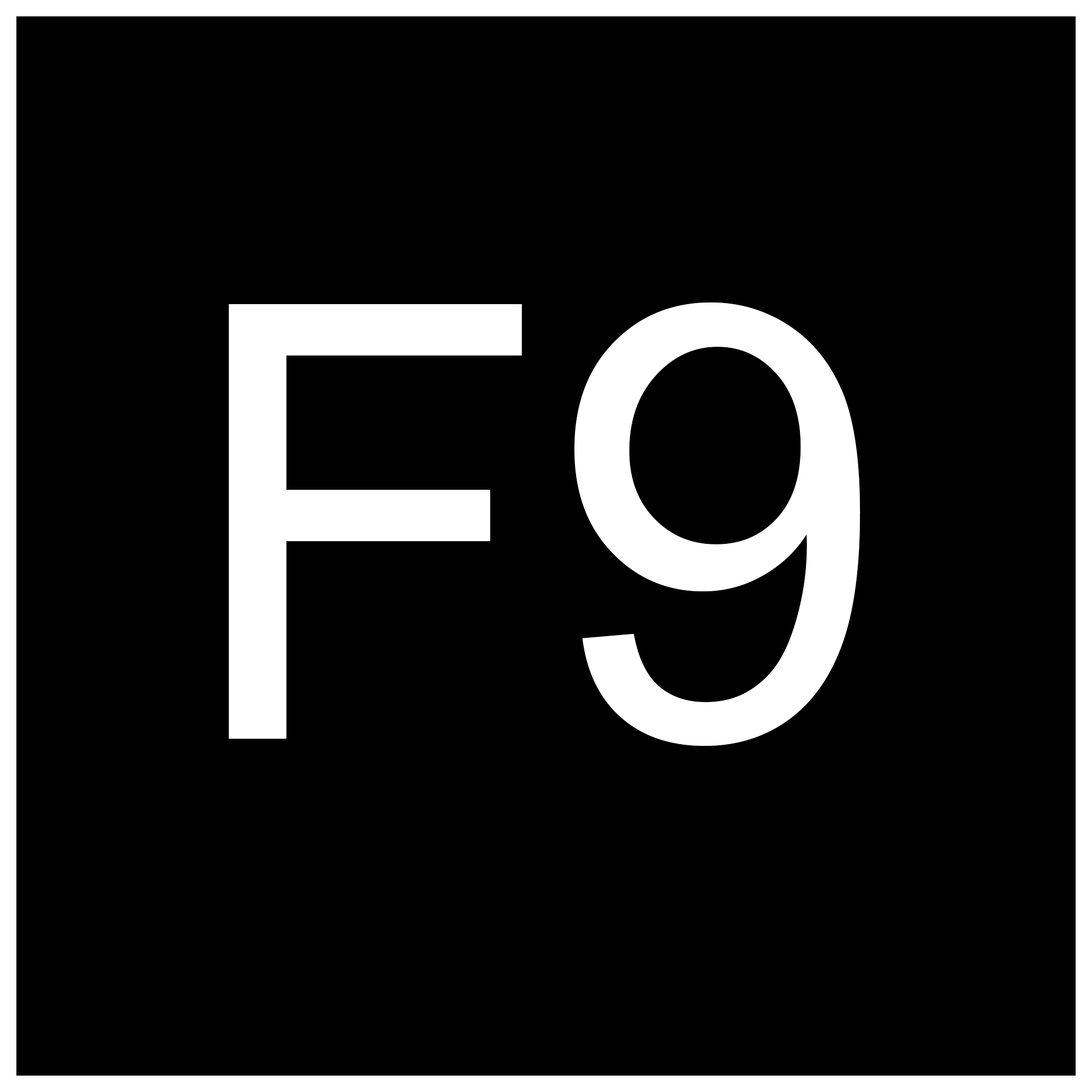
<style>
.page{position:relative;width:1092px;height:1092px;background:#000000}
.page>*{position:absolute;margin:0}
.t1{font:606.7px "ArialMT";color:#ffffff}
</style>
<div class="page">
<p class="t1" style="left:229px;top:302px;width:631px;height:444px">F9</p>
</div>
